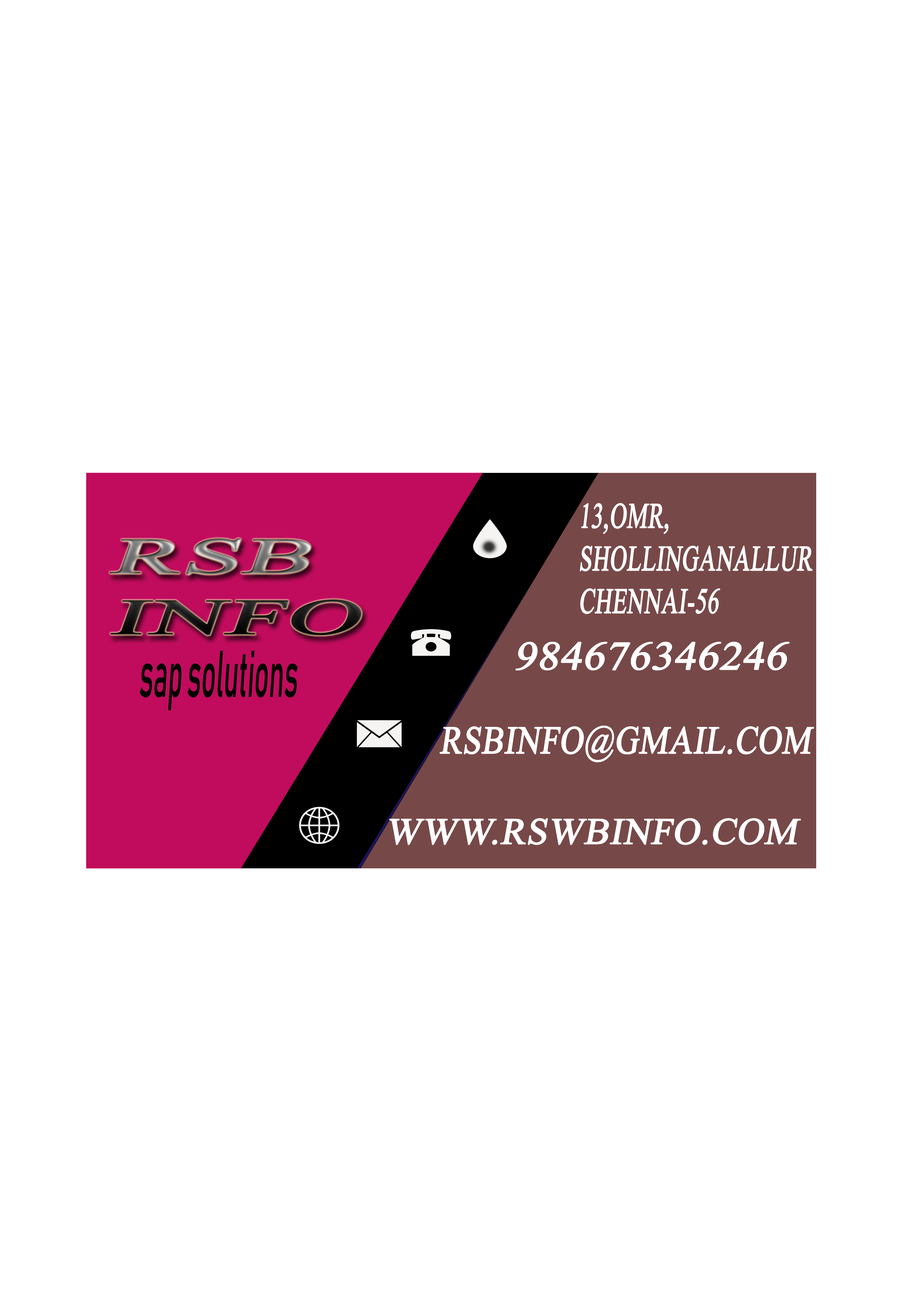
<style>
.page{position:relative;width:918px;height:1299px;background:#ffffff}
.page>*{position:absolute;margin:0}
.t1{font:35.5px "TimesNewRomanPSMT";color:#ffffff;text-transform:uppercase;font-weight:bold;font-style:italic;scale:0.64 1}
.t2{font:50.8px "TimesNewRomanPSMT";text-transform:uppercase;font-weight:bold;font-style:italic;scale:2.02 1}
.t3{font:39.9px "TimesNewRomanPSMT";color:#ffffff;text-transform:uppercase;font-weight:bold;font-style:italic;scale:1.08 1}
.t4{font:65.1px "Bahnschrift";color:#000000;scale:0.42 1}
.t5{font:39px "TimesNewRomanPSMT";color:#ffffff;text-transform:uppercase;font-weight:bold;font-style:italic;scale:0.83 1}
.t6{font:37px "TimesNewRomanPSMT";color:#ffffff;text-transform:uppercase;font-weight:bold;font-style:italic}
</style>
<div class="page">
<p class="t1" style="left:580px;top:503px;width:233px;height:111px">13,omr,<br>shollinganallur<br>chennai-56</p>
<p class="t2" style="left:109px;top:538px;width:253px;height:98px">rsb <br>info</p>
<p class="t3" style="left:515px;top:642px;width:275px;height:28px">984676346246</p>
<p class="t4" style="left:140px;top:650px;width:158px;height:60px">sap solutions</p>
<p class="t5" style="left:439px;top:725px;width:375px;height:37px">rsbinfo@gmail.com</p>
<p class="t6" style="left:389px;top:818px;width:412px;height:27px">www.rswbinfo.com</p>
</div>
